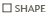
<style>
.page{position:relative;width:48px;height:16px;background:#ffffff}
.page>*{position:absolute;margin:0}
.t1{font:10px "AmiraParadiso";color:#6a685a}
</style>
<div class="page">
<p class="t1" style="left:14px;top:5px;width:32px;height:7px">SHAPE</p>
</div>
